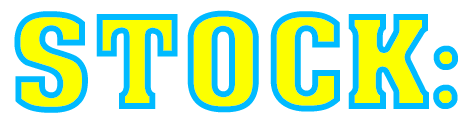
<style>
.page{position:relative;width:472px;height:128px;background:#ffffff}
.page>*{position:absolute;margin:0}
.t1{font:125px "AcmeFont"}
</style>
<div class="page">
<p class="t1" style="left:14px;top:10px;width:444px;height:103px">STOCK:</p>
</div>
